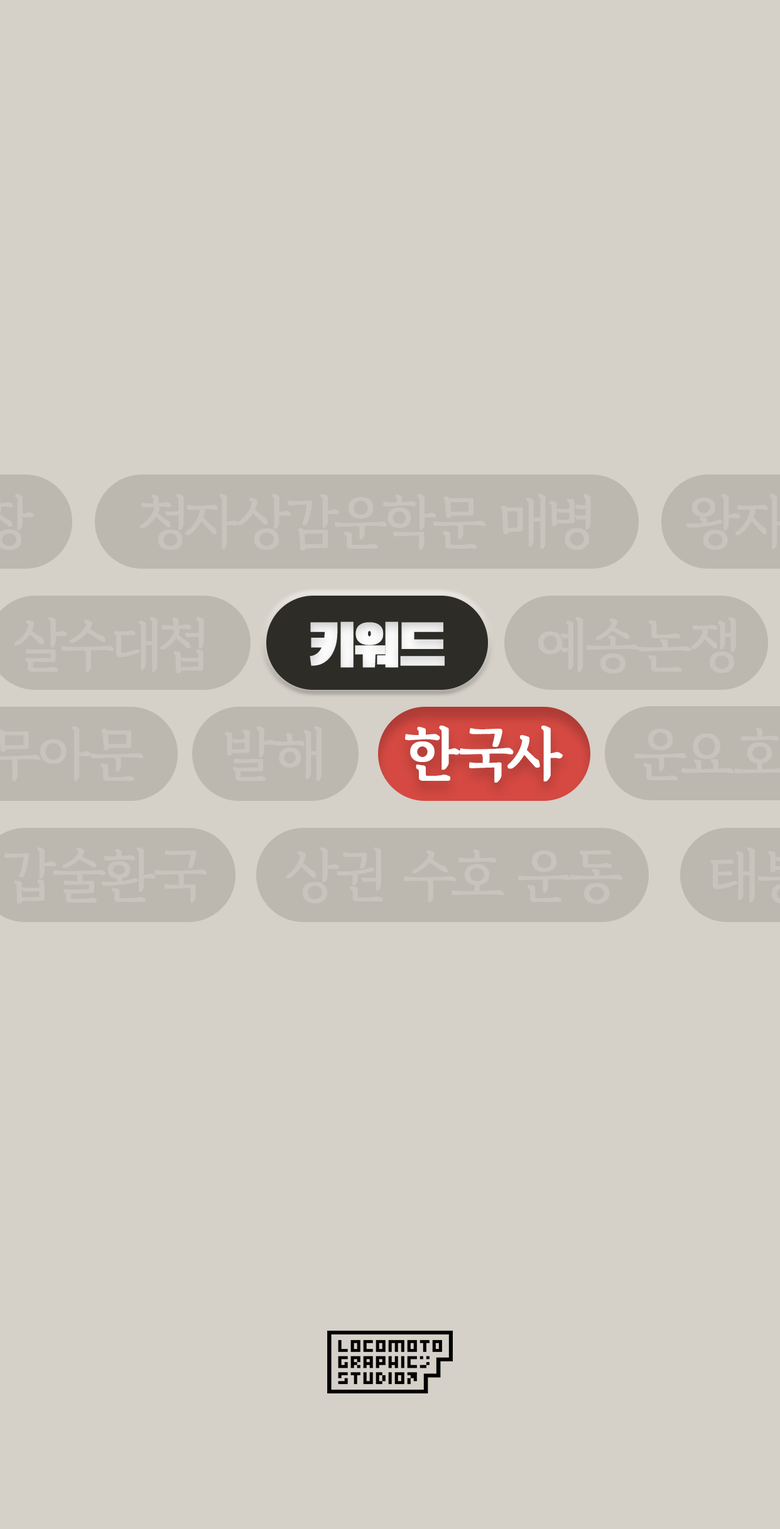
<style>
.page{position:relative;width:780px;height:1529px;background:#d5d0c8}
.page>*{position:absolute;margin:0}
.t1{font:57.2px "GyeonggiBatangROTF";letter-spacing:-0.05em;color:#c7c4bd;font-weight:bold}
.t2{font:58.8px "BlackHanSans-Regular";letter-spacing:-0.05em;color:#ffffff;font-weight:bold}
.t3{font:57.2px "GyeonggiBatangBOTF";letter-spacing:-0.05em;color:#ffffff;font-weight:bold}
</style>
<div class="page">
<p class="t1" style="left:140px;top:494px;width:451px;height:57px">청자상감운학문 매병</p>
<p class="t1" style="left:14px;top:617px;width:190px;height:57px">살수대첩</p>
<p class="t1" style="left:538px;top:617px;width:198px;height:57px">예송논쟁</p>
<p class="t2" style="left:310px;top:622px;width:134px;height:46px">키워드</p>
<p class="t3" style="left:405px;top:726px;width:158px;height:57px">한국사</p>
<p class="t1" style="left:225px;top:726px;width:96px;height:56px">발해</p>
<p class="t1" style="left:4px;top:848px;width:203px;height:56px">갑술환국</p>
<p class="t1" style="left:286px;top:848px;width:336px;height:56px">상권 수호 운동</p>
</div>
